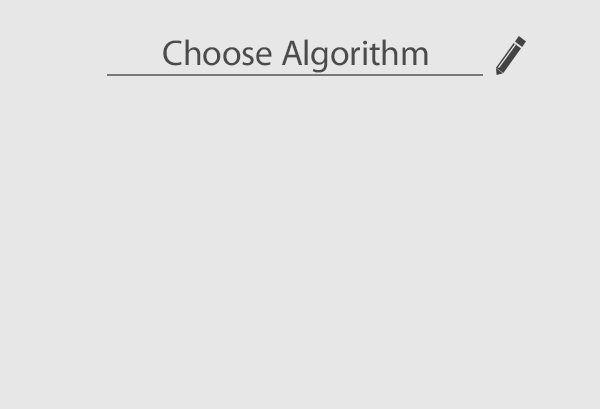
<style>
.page{position:relative;width:600px;height:409px;background:#e7e7e7}
.page>*{position:absolute;margin:0}
.t1{font:36px "MingLan_UI";letter-spacing:-0.01em;color:#4b4b4b}
</style>
<div class="page">
<p class="t1" style="left:163px;top:39px;width:265px;height:34px">Choose Algorithm</p>
</div>
